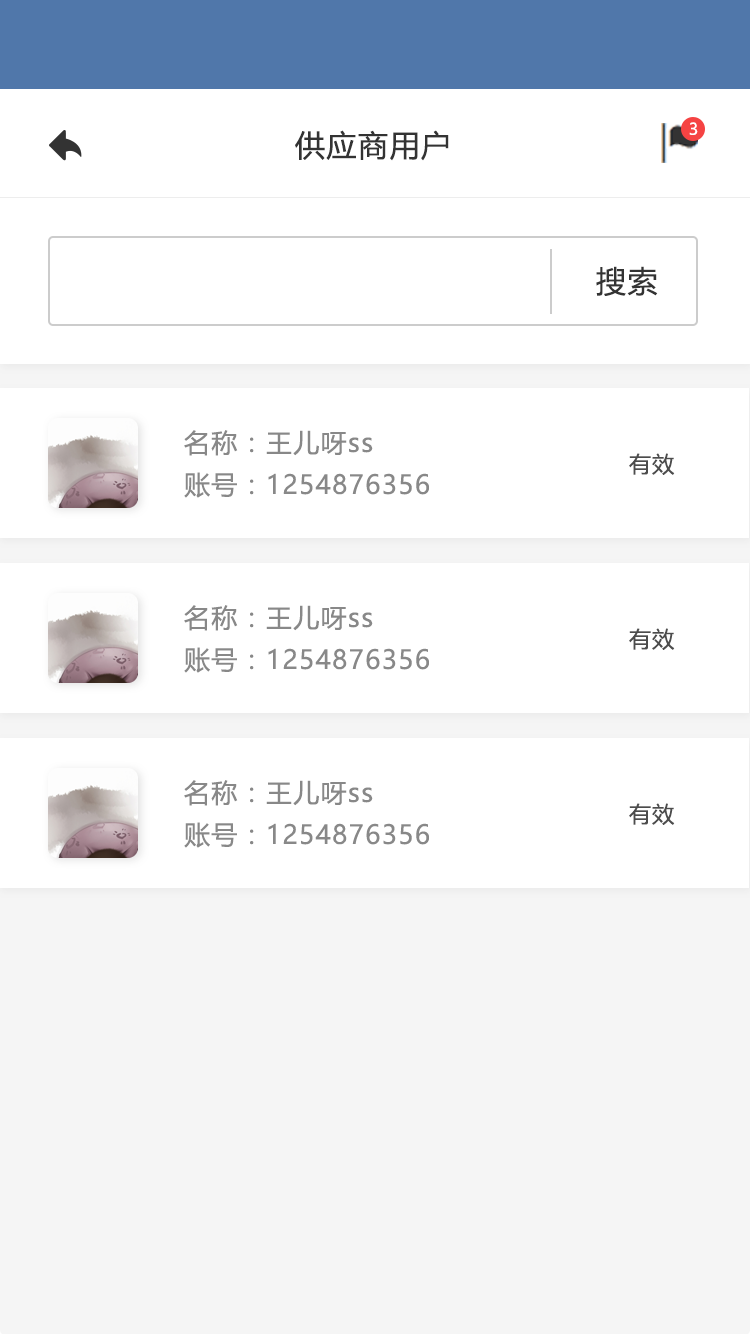
<style>
.page{position:relative;width:750px;height:1334px;background:#ffffff}
.page>*{position:absolute;margin:0}
.t1{font:16px "MicrosoftYaHeiUI";color:#ffffff}
.t2{font:30px "MicrosoftYaHeiUI";letter-spacing:0.05em;color:#333333}
.t3{font:26px "MicrosoftYaHeiUI";letter-spacing:0.05em;color:#888888}
.t4{font:22px "MicrosoftYaHeiUI";letter-spacing:0.05em;color:#4c4c4c}
</style>
<div class="page">
<p class="t1" style="left:689px;top:122px;width:9px;height:13px">3</p>
<p class="t2" style="left:295px;top:130px;width:154px;height:31px">供应商用户</p>
<p class="t2" style="left:596px;top:266px;width:62px;height:30px">搜索</p>
<p class="t3" style="left:184px;top:430px;width:189px;height:26px">名称：王儿呀ss</p>
<p class="t4" style="left:629px;top:453px;width:46px;height:22px">有效</p>
<p class="t3" style="left:184px;top:472px;width:245px;height:26px">账号：1254876356</p>
<p class="t3" style="left:184px;top:605px;width:189px;height:26px">名称：王儿呀ss</p>
<p class="t4" style="left:629px;top:628px;width:46px;height:22px">有效</p>
<p class="t3" style="left:184px;top:647px;width:245px;height:26px">账号：1254876356</p>
<p class="t3" style="left:184px;top:780px;width:189px;height:26px">名称：王儿呀ss</p>
<p class="t4" style="left:629px;top:803px;width:46px;height:22px">有效</p>
<p class="t3" style="left:184px;top:822px;width:245px;height:26px">账号：1254876356</p>
</div>
